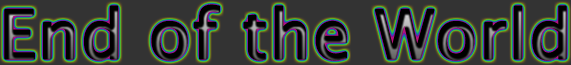
<style>
.page{position:relative;width:571px;height:65px;background:#333333}
.page>*{position:absolute;margin:0}
.t1{font:67.6px "LucidaGrande";font-weight:bold}
</style>
<div class="page">
<p class="t1" style="left:4px;top:4px;width:563px;height:57px">End of the World</p>
</div>
